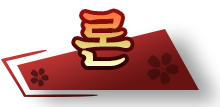
<style>
.page{position:relative;width:220px;height:107px;background:#ffffff}
.page>*{position:absolute;margin:0}
.t1{font:62.5px "SDKukdetopokki-aLt";letter-spacing:0.24em}
</style>
<div class="page">
<p class="t1" style="left:75px;top:12px;width:56px;height:54px">론</p>
</div>
